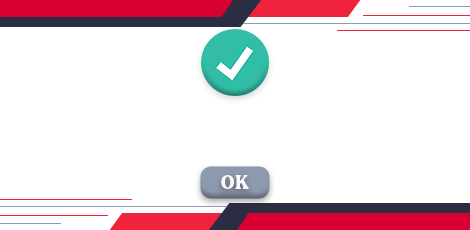
<style>
.page{position:relative;width:470px;height:230px;background:#ffffff}
.page>*{position:absolute;margin:0}
.t1{font:18px "MADEDillan";letter-spacing:0.025em;color:#f9f9f9}
</style>
<div class="page">
<p class="t1" style="left:221px;top:175px;width:28px;height:14px">OK</p>
</div>
